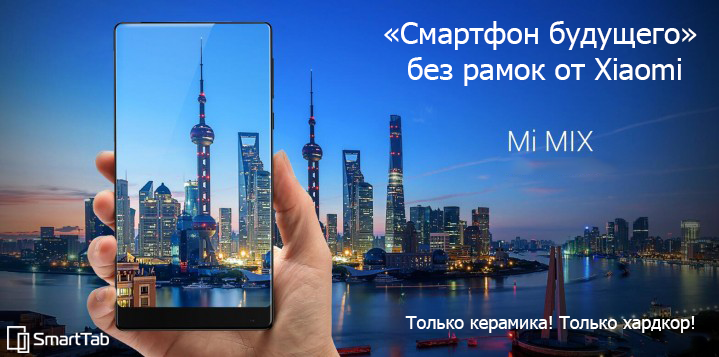
<style>
.page{position:relative;width:719px;height:357px}
.page>*{position:absolute;margin:0}
.t1{font:30px "Tahoma";color:#ffffff}
.t2{font:18px "Tahoma";color:#ffffff}
</style>
<div class="page">
<p class="t1" style="left:384px;top:21px;width:313px;height:65px;text-align:center">«Смартфон будущего» <br>без рамок от Xiaomi</p>
<p class="t2" style="left:405px;top:316px;width:290px;height:17px">Только керамика! Только хардкор!</p>
</div>
